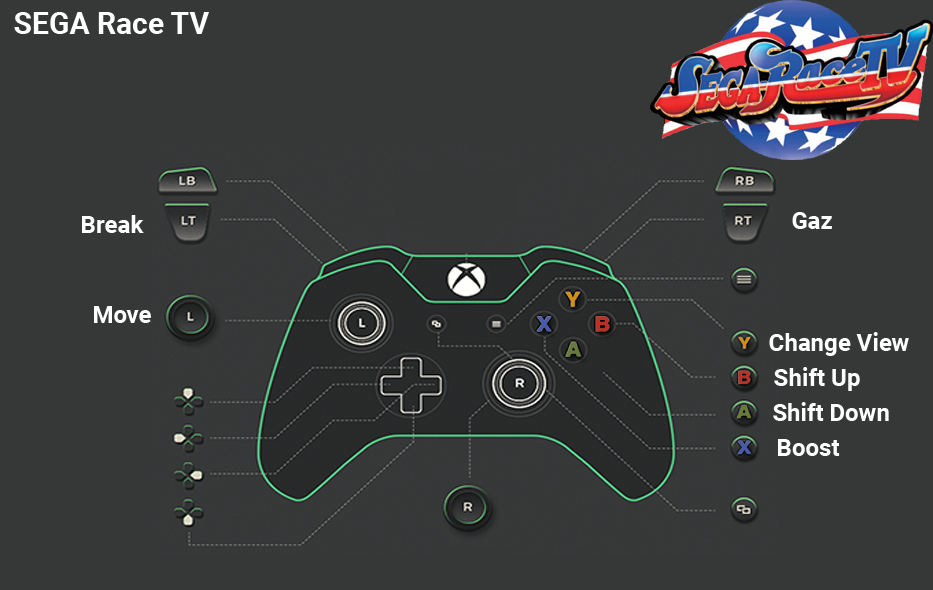
<style>
.page{position:relative;width:933px;height:590px;background:#363838}
.page>*{position:absolute;margin:0}
.t1{font:30px "Roboto-Bold";color:#ffffff}
.t2{font:24px "Roboto-Bold";color:#ffffff}
</style>
<div class="page">
<p class="t1" style="left:14px;top:12px;width:195px;height:22px">SEGA Race TV</p>
<p class="t2" style="left:82px;top:215px;width:62px;height:18px">Break</p>
<p class="t2" style="left:792px;top:212px;width:40px;height:17px">Gaz</p>
<p class="t2" style="left:94px;top:306px;width:57px;height:17px">Move</p>
<p class="t2" style="left:769px;top:332px;width:140px;height:24px">Change View</p>
<p class="t2" style="left:774px;top:367px;width:86px;height:24px">Shift Up</p>
<p class="t2" style="left:773px;top:402px;width:116px;height:19px">Shift Down</p>
<p class="t2" style="left:778px;top:439px;width:62px;height:17px">Boost</p>
</div>
